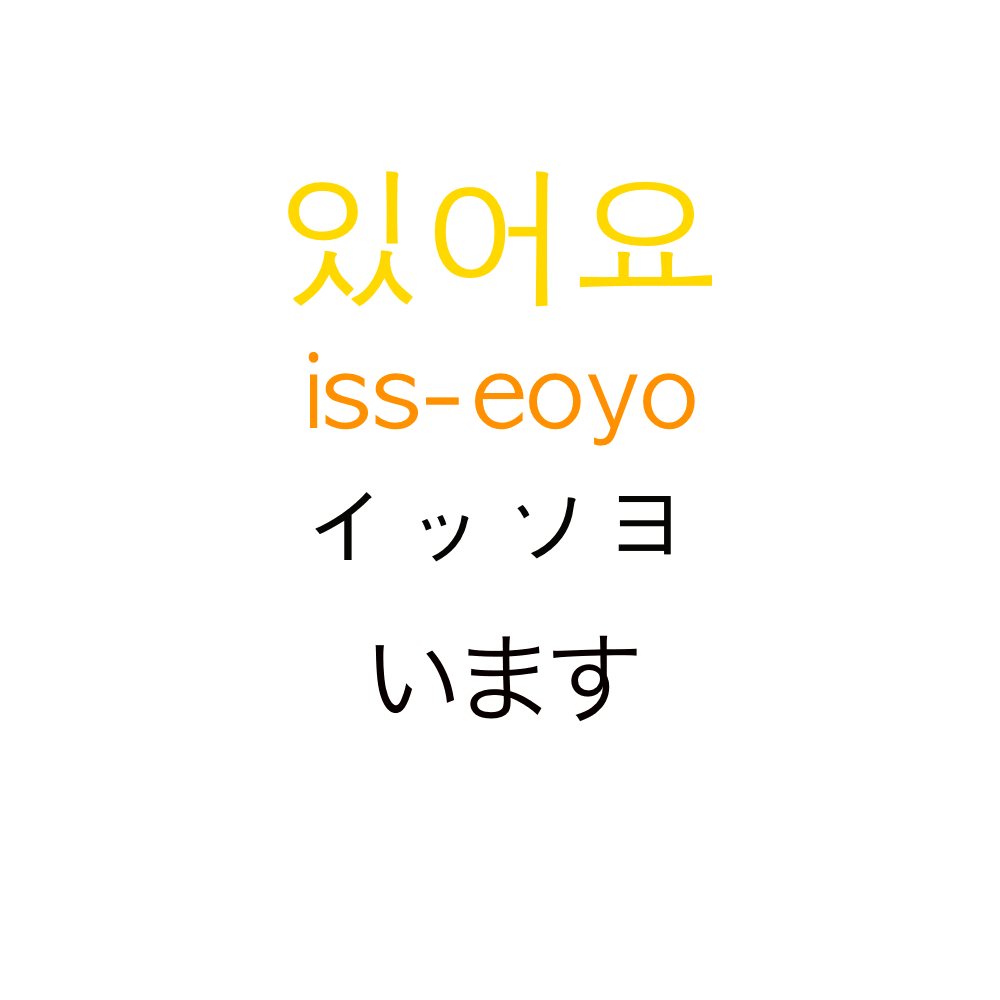
<style>
.page{position:relative;width:1000px;height:1000px;background:#ffffff}
.page>*{position:absolute;margin:0}
.t1{font:150px "AppleGothic";color:#ffd800}
.t2{font:100px "AppleGothic";color:#ff9000}
.t3{font:100px "AppleGothic";color:#060605}
.t4{font:100px "HiraKakuProN-W3";color:#080000}
</style>
<div class="page">
<p class="t1" style="left:288px;top:171px;width:424px;height:136px">있어요</p>
<p class="t2" style="left:308px;top:351px;width:387px;height:95px">iss-eoyo</p>
<p class="t3" style="left:315px;top:492px;width:356px;height:70px">イッソヨ</p>
<p class="t4" style="left:375px;top:635px;width:262px;height:87px">います</p>
</div>
